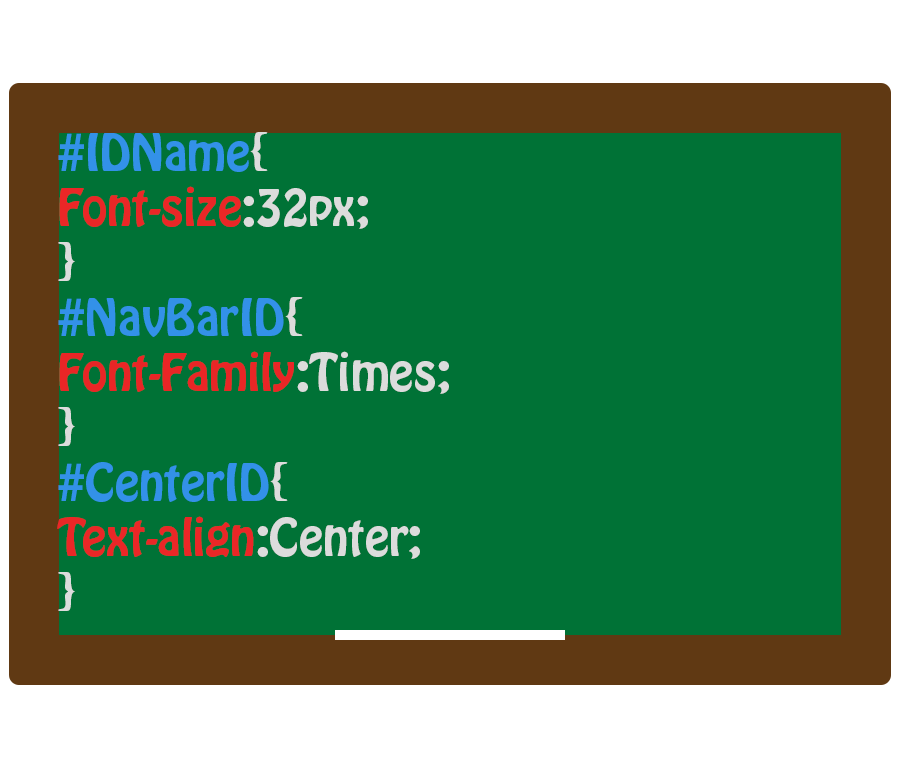
<style>
.page{position:relative;width:900px;height:768px;background:#007236}
.page>*{position:absolute;margin:0}
.t1{font:45.8px "HoboStd";color:#e92626}
.t2{font:45.8px "HoboStd";color:#3391e8}
.t3{font:45.8px "HoboStd";color:#dcdcdc}
.t4{font:45.8px "HoboStd";color:#ea2727}
</style>
<div class="page">
<p class="t1" style="left:57px;top:132px;width:392px;height:479px"><span class="t2">#IDName</span><span class="t3">{<br></span><span class="t4">Font-size</span><span class="t3">:32px;<br>}<br></span><span class="t2">#NavBarID</span><span class="t3">{<br></span>Font-Family<span class="t3">:Times;<br>}<br></span><span class="t2">#CenterID</span><span class="t3">{<br></span><span class="t4">Text-align</span><span class="t3">:Center;<br>}</span></p>
</div>
